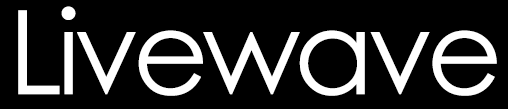
<style>
.page{position:relative;width:508px;height:109px;background:#000000}
.page>*{position:absolute;margin:0}
.t1{font:116.7px "CenturyGothic";letter-spacing:-0.05em;color:#ffffff}
</style>
<div class="page">
<p class="t1" style="left:18px;top:6px;width:479px;height:90px">Livewave</p>
</div>
